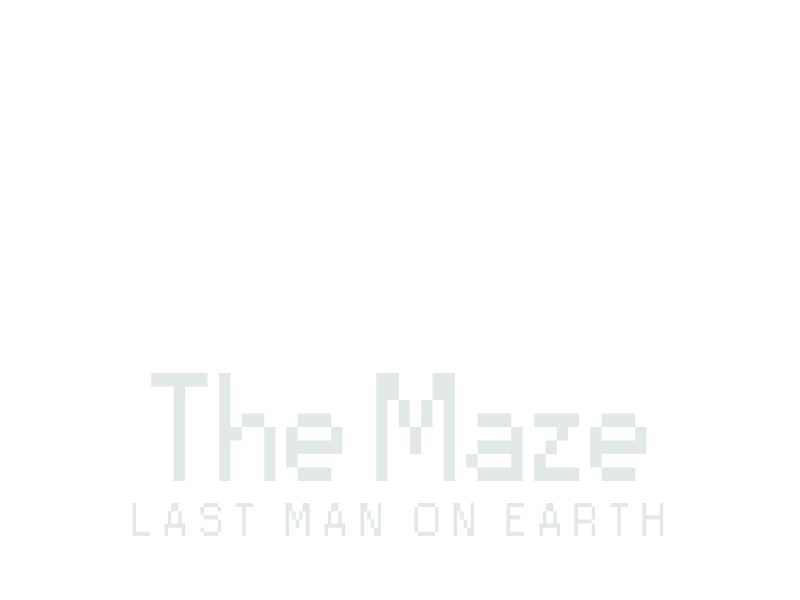
<style>
.page{position:relative;width:800px;height:600px;background:#ffffff}
.page>*{position:absolute;margin:0}
.t1{font:144px "Small Fonts";color:#e1e8e7}
.t2{font:44px "Small Fonts";letter-spacing:0.26em;color:#e1e8e7}
</style>
<div class="page">
<p class="t1" style="left:151px;top:373px;width:496px;height:108px">The Maze</p>
<p class="t2" style="left:132px;top:503px;width:531px;height:33px">LAST MAN ON EARTH</p>
</div>
